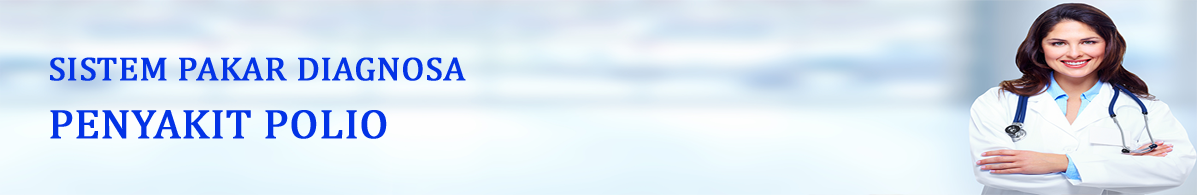
<style>
.page{position:relative;width:1197px;height:195px}
.page>*{position:absolute;margin:0}
.t1{font:33.3px "Cambria";color:#0333e6;font-weight:bold;scale:1.05 1}
.t2{font:41.7px "Cambria";color:#0333e6;font-weight:bold;scale:1.05 1}
</style>
<div class="page">
<p class="t1" style="left:50px;top:57px;width:416px;height:24px">SISTEM PAKAR DIAGNOSA</p>
<p class="t2" style="left:50px;top:110px;width:337px;height:29px">PENYAKIT POLIO</p>
</div>
